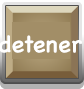
<style>
.page{position:relative;width:84px;height:89px;background:#a28e67}
.page>*{position:absolute;margin:0}
.t1{font:24px "ChalkboardSE-Regular";color:#ffffff}
</style>
<div class="page">
<p class="t1" style="left:0px;top:35px;width:82px;height:18px">detener</p>
</div>
